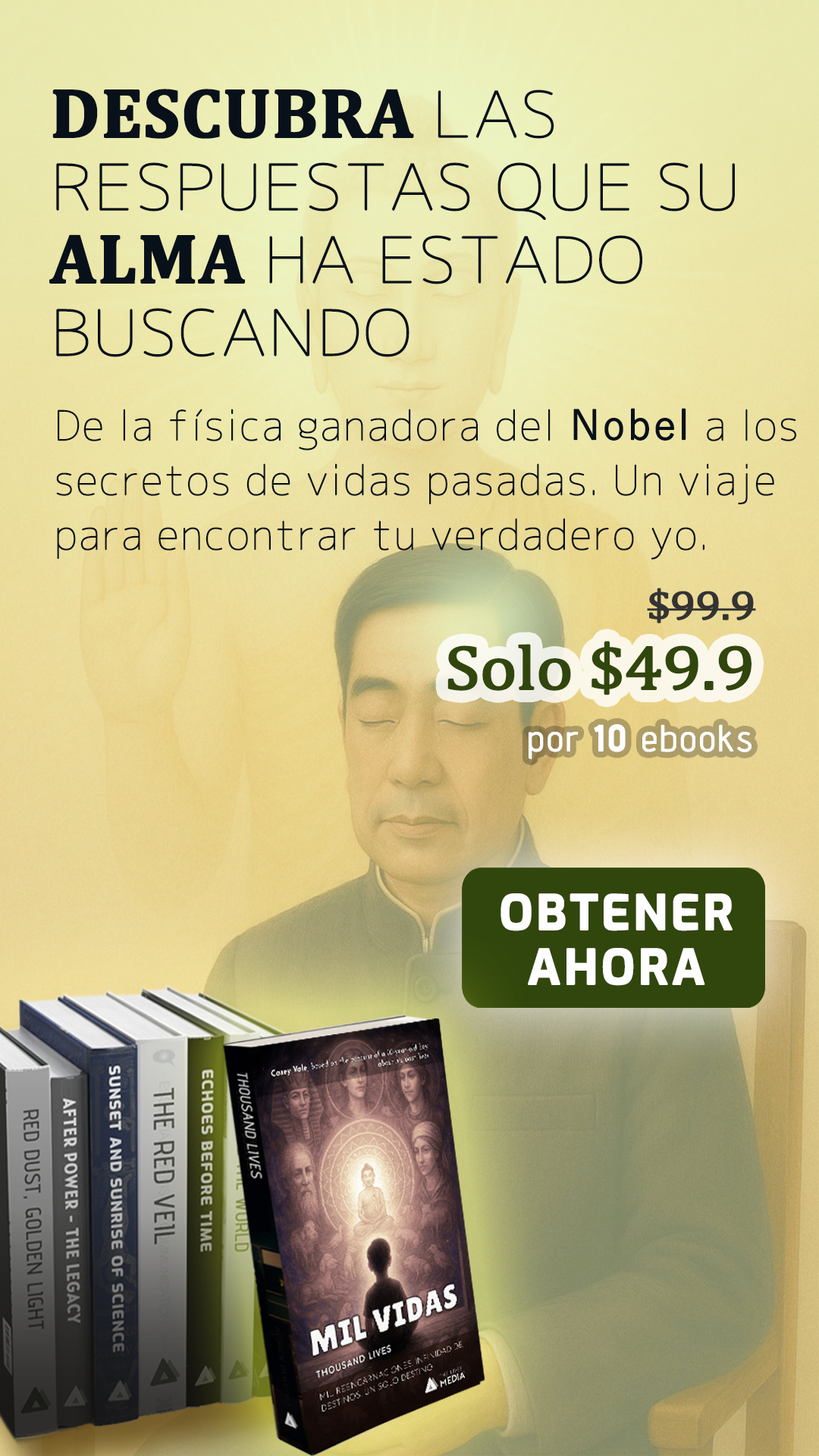
<style>
.page{position:relative;width:819px;height:1456px}
.page>*{position:absolute;margin:0}
.t1{font:62.8px/72.8px "Chogokuboso-Gothic";color:#08101a;font-weight:bold;scale:1.11 1}
.t2{font:69.8px/72.8px "Cambria-Bold";color:#08101a;font-weight:bold}
.t3{font:40.9px/54.6px "Chogokuboso-Gothic";letter-spacing:0.025em;color:#08101a;font-weight:bold}
.t4{font:40.9px/54.6px "YuGothic-Regular";letter-spacing:0.025em;color:#08101a;font-weight:bold}
.t5{font:40.9px "Cambria";letter-spacing:-0.025em;color:#333333;font-weight:bold;scale:1.11 1}
.t6{font:62.8px "Cambria";letter-spacing:-0.025em;color:#31460c;font-weight:bold;scale:1.11 1}
.t7{font:40.9px "Cambria";letter-spacing:-0.025em;color:#31460c;font-weight:bold;scale:1.11 1}
.t8{font:36.4px "AdventPro-Regular";letter-spacing:0.05em;color:#ffffff;font-weight:bold}
.t9{font:36.4px "AdventPro-Bold";letter-spacing:0.05em;color:#ffffff;font-weight:bold}
.t10{font:47.8px/54.6px "Exo-Bold";letter-spacing:0.05em;color:#fefefe;font-weight:bold}
</style>
<div class="page">
<p class="t1" style="left:49px;top:89px;width:686px;height:268px"><span class="t2">DESCUBRA </span>LAS RESPUESTAS QUE SU<span class="t2"> ALMA </span>HA ESTADO BUSCANDO</p>
<p class="t3" style="left:56px;top:408px;width:740px;height:152px">De la física ganadora del <span class="t4">Nobel </span>a los secretos de vidas pasadas. Un viaje para encontrar tu verdadero yo.</p>
<p class="t5" style="left:647px;top:588px;width:109px;height:35px">$99.9</p>
<p class="t6" style="left:447px;top:641px;width:304px;height:54px"><span class="t7"><br></span>Solo $49.9</p>
<p class="t8" style="left:529px;top:724px;width:222px;height:36px">por <span class="t9">10</span> ebooks</p>
<p class="t10" style="left:500px;top:893px;width:233px;height:93px;text-align:center">OBTENER AHORA</p>
</div>
